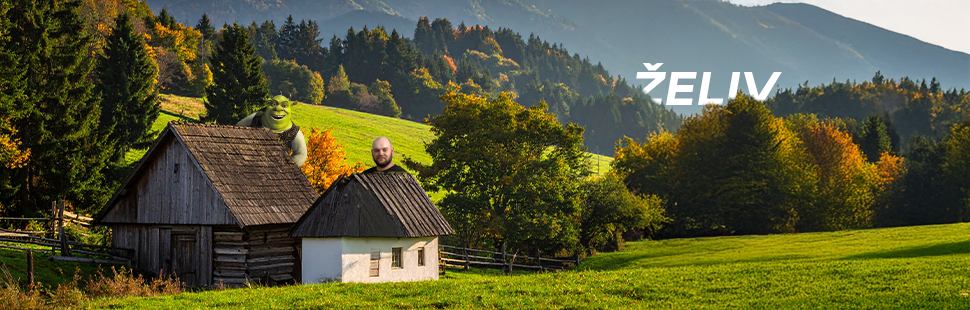
<style>
.page{position:relative;width:970px;height:310px}
.page>*{position:absolute;margin:0}
.t1{font:41px "AreaExtended-ExtrablackItalic";color:#ffffff}
</style>
<div class="page">
<p class="t1" style="left:631px;top:63px;width:151px;height:42px">ŽELIV</p>
</div>
